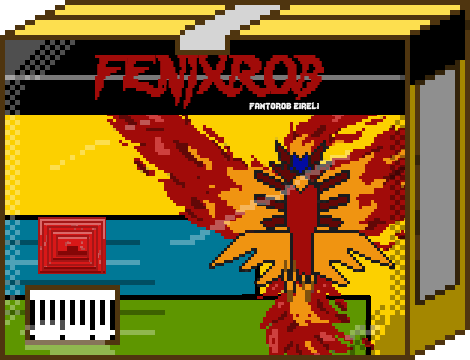
<style>
.page{position:relative;width:470px;height:360px}
.page>*{position:absolute;margin:0}
.t1{font:48px "Lady-Radical";color:#a10b09;scale:0.72 1}
.t2{font:12px "Lady-Radical";color:#fbfbfb}
</style>
<div class="page">
<p class="t1" style="left:95px;top:55px;width:229px;height:54px">FENIXROB</p>
<p class="t2" style="left:249px;top:102px;width:70px;height:8px">fantorob eireli</p>
</div>
